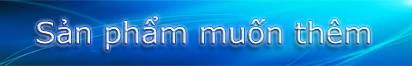
<style>
.page{position:relative;width:412px;height:66px}
.page>*{position:absolute;margin:0}
.t1{font:30px "MSReferenceSansSerif"}
</style>
<div class="page">
<p class="t1" style="left:36px;top:16px;width:334px;height:35px">Sản phẩm muốn thêm</p>
</div>
